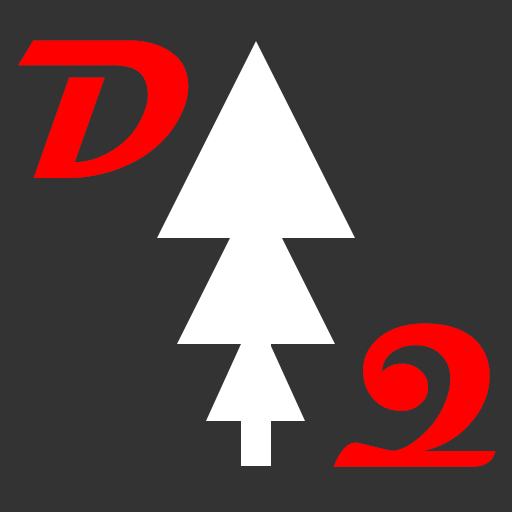
<style>
.page{position:relative;width:512px;height:512px;background:#333333}
.page>*{position:absolute;margin:0}
.t1{font:200px "Magneto-Bold";color:#ff0000}
</style>
<div class="page">
<p class="t1" style="left:18px;top:40px;width:171px;height:138px">D</p>
<p class="t1" style="left:333px;top:323px;width:163px;height:144px">Q</p>
</div>
